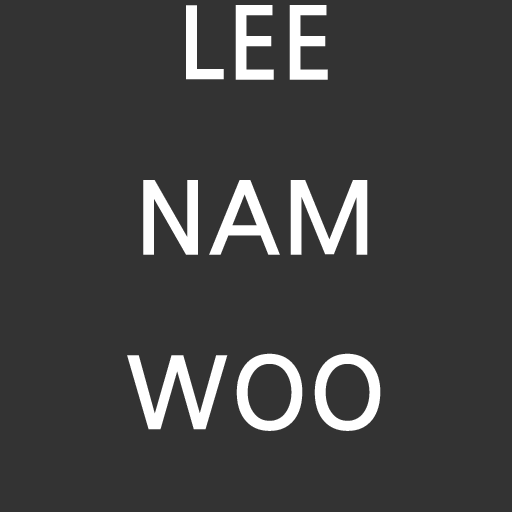
<style>
.page{position:relative;width:512px;height:512px;background:#333333}
.page>*{position:absolute;margin:0}
.t1{font:100px "JejuGothic";color:#ffffff}
</style>
<div class="page">
<p class="t1" style="left:127px;top:5px;width:254px;height:426px;text-align:center">LEE<br>NAM<br>WOO</p>
</div>
